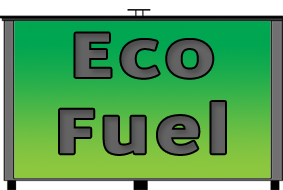
<style>
.page{position:relative;width:283px;height:190px}
.page>*{position:absolute;margin:0}
.t1{font:63.5px "MartelSans-Black";letter-spacing:0.06em;color:#636363;scale:1.18 1}
</style>
<div class="page">
<p class="t1" style="left:60px;top:33px;width:165px;height:121px;text-align:center">Eco<br>Fuel</p>
</div>
